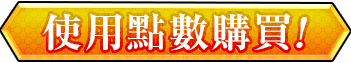
<style>
.page{position:relative;width:351px;height:63px}
.page>*{position:absolute;margin:0}
.t1{font:40px "RyuminPr6N-ExBold";letter-spacing:0.075em;color:#fffffa}
.t2{font:40px "RyuminPr6N-ExBold";letter-spacing:0.075em;color:#fffffa;font-style:italic}
</style>
<div class="page">
<p class="t1" style="left:43px;top:13px;width:264px;height:38px">使用點數購買<span class="t2">!</span></p>
</div>
